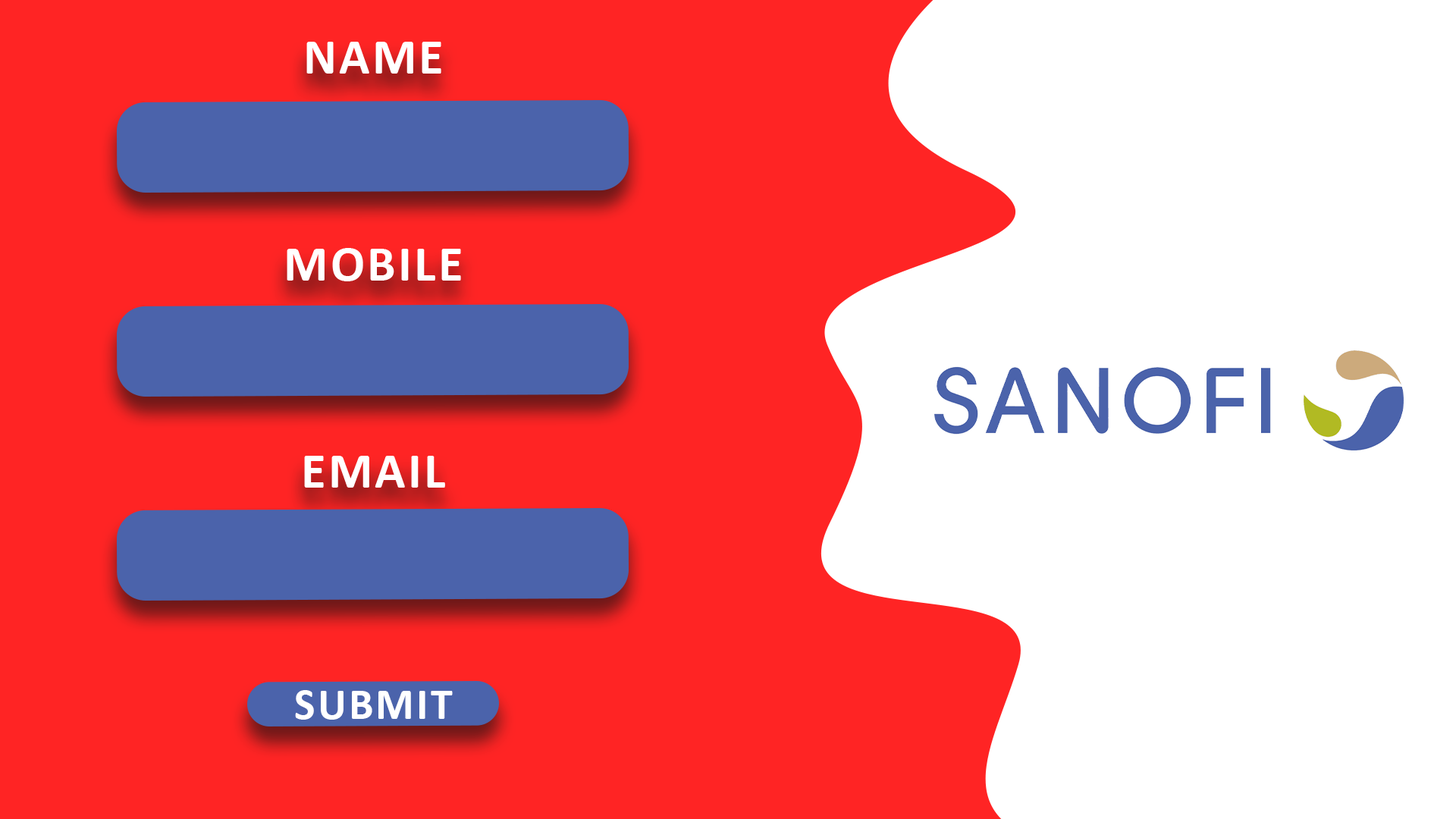
<style>
.page{position:relative;width:1456px;height:819px;background:#ff2424}
.page>*{position:absolute;margin:0}
.t1{font:50.6px "Calibri-Bold";letter-spacing:0.05em;color:#ffffff}
.t2{font:44.2px "Calibri-Bold";letter-spacing:0.05em;color:#ffffff}
</style>
<div class="page">
<p class="t1" style="left:306px;top:42px;width:135px;height:32px">NAME</p>
<p class="t1" style="left:287px;top:248px;width:174px;height:33px">MOBILE</p>
<p class="t1" style="left:304px;top:456px;width:141px;height:32px">EMAIL</p>
<p class="t2" style="left:295px;top:690px;width:158px;height:30px">SUBMIT</p>
</div>
